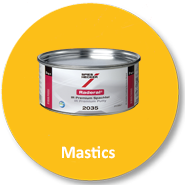
<style>
.page{position:relative;width:185px;height:185px;background:#fcbf18}
.page>*{position:absolute;margin:0}
.t1{font:17.8px "Calibri-Bold";color:#ffffff}
</style>
<div class="page">
<p class="t1" style="left:62px;top:146px;width:53px;height:13px">Mastics</p>
</div>
